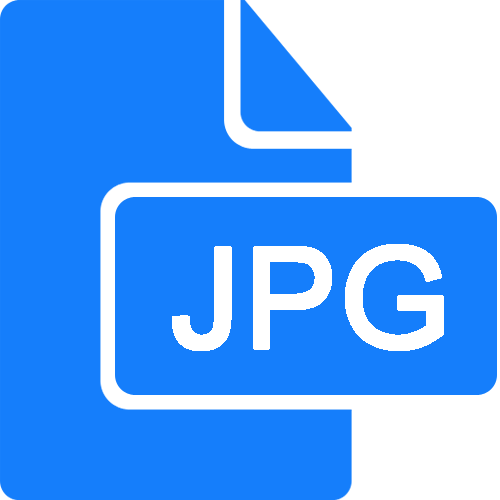
<style>
.page{position:relative;width:500px;height:500px;background:#157efb}
.page>*{position:absolute;margin:0}
.t1{font:140px "ArialMT";color:#ffffff;font-weight:bold}
</style>
<div class="page">
<p class="t1" style="left:172px;top:244px;width:272px;height:107px">JPG</p>
</div>
